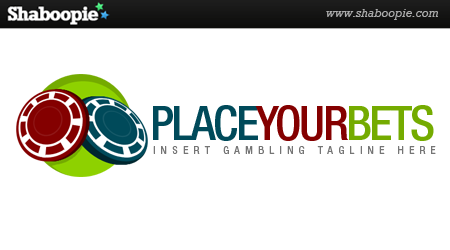
<style>
.page{position:relative;width:450px;height:250px;background:#ffffff}
.page>*{position:absolute;margin:0}
.t1{font:48px "HelveticaNeueLTStd-MdCn";letter-spacing:-0.05em;color:#004a5a;text-transform:uppercase}
.t2{font:48px "HelveticaNeueLTStd-MdCn";letter-spacing:-0.05em;color:#840000;text-transform:uppercase}
.t3{font:48px "HelveticaNeueLTStd-MdCn";letter-spacing:-0.05em;color:#74ab00;text-transform:uppercase}
.t4{font:11px "HelveticaNeueLTStd-Cn";letter-spacing:0.49em;color:#757575;text-transform:uppercase}
</style>
<div class="page">
<p class="t1" style="left:153px;top:105px;width:281px;height:36px">Place<span class="t2">YOUR</span><span class="t3">BETS</span></p>
<p class="t4" style="left:153px;top:146px;width:283px;height:8px">INSERT GAMBLING TAGLINE HERE</p>
</div>
